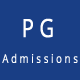
<style>
.page{position:relative;width:80px;height:80px;background:#193e85}
.page>*{position:absolute;margin:0}
.t1{font:25px "OpenSans";letter-spacing:0.261em;color:#ffffff;font-weight:bold;scale:0.8 1}
.t2{font:11.9px "OpenSans";letter-spacing:0.261em;color:#fefefe;font-weight:bold;scale:0.8 1}
</style>
<div class="page">
<p class="t1" style="left:23px;top:18px;width:30px;height:20px">PG</p>
<p class="t2" style="left:2px;top:53px;width:76px;height:10px">Admissions</p>
</div>
